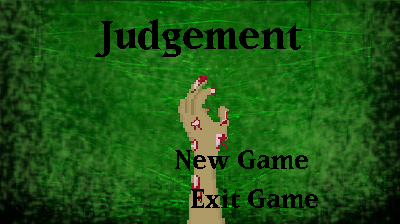
<style>
.page{position:relative;width:400px;height:224px}
.page>*{position:absolute;margin:0}
.t1{font:48px "Matrix-Bold";color:#000000}
.t2{font:32px/64px "Matrix-Bold";color:#000000}
</style>
<div class="page">
<p class="t1" style="left:95px;top:19px;width:207px;height:38px">Judgement</p>
<p class="t2" style="left:175px;top:150px;width:133px;height:21px;text-align:center">New Game<br>Exit</p>
<p class="t2" style="left:191px;top:189px;width:127px;height:19px;text-align:center">Exit Game<br>Exit</p>
</div>
